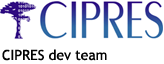
<style>
.page{position:relative;width:164px;height:64px;background:#ffffff}
.page>*{position:absolute;margin:0}
.t1{font:14px "TrebuchetMS";color:#020202}
</style>
<div class="page">
<p class="t1" style="left:2px;top:49px;width:105px;height:12px">CIPRES dev team</p>
</div>
